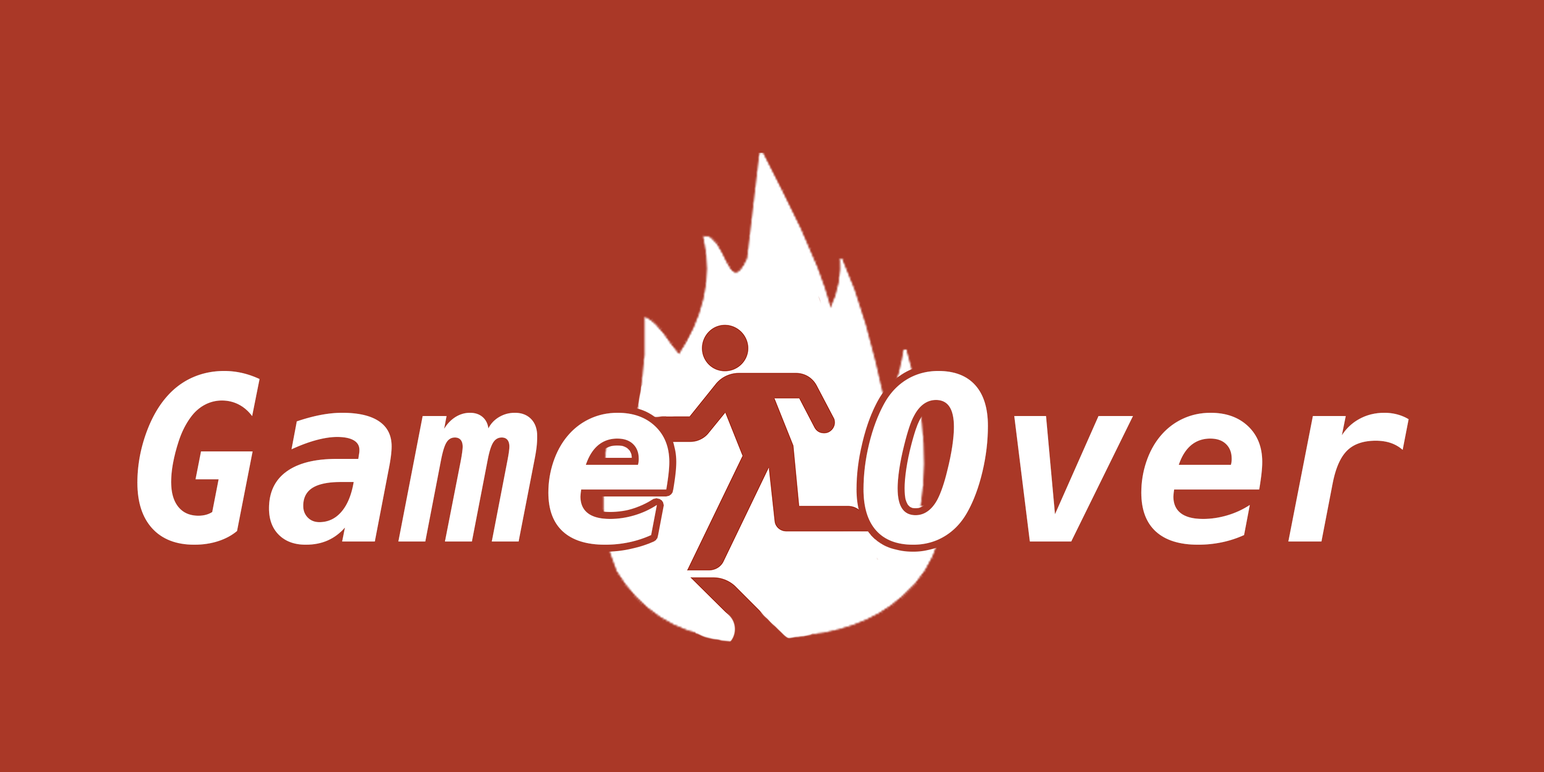
<style>
.page{position:relative;width:1544px;height:772px;background:#aa3827}
.page>*{position:absolute;margin:0}
.t1{font:229.3px "Menlo-BoldItalic";color:#ffffff}
</style>
<div class="page">
<p class="t1" style="left:137px;top:371px;width:533px;height:174px">Game</p>
<p class="t1" style="left:863px;top:371px;width:546px;height:174px">Over</p>
</div>
